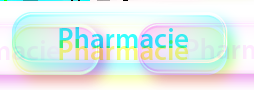
<style>
.page{position:relative;width:254px;height:90px}
.page>*{position:absolute;margin:0}
.t1{font:29.2px "MyriadPro-Semibold"}
</style>
<div class="page">
<p class="t1" style="left:59px;top:27px;width:129px;height:21px">Pharmacie</p>
</div>
